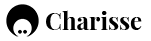
<style>
.page{position:relative;width:151px;height:41px;background:#ffffff}
.page>*{position:absolute;margin:0}
.t1{font:24px "PlayfairDisplay-Bold";color:#000000}
</style>
<div class="page">
<p class="t1" style="left:46px;top:10px;width:96px;height:20px">Charisse</p>
</div>
